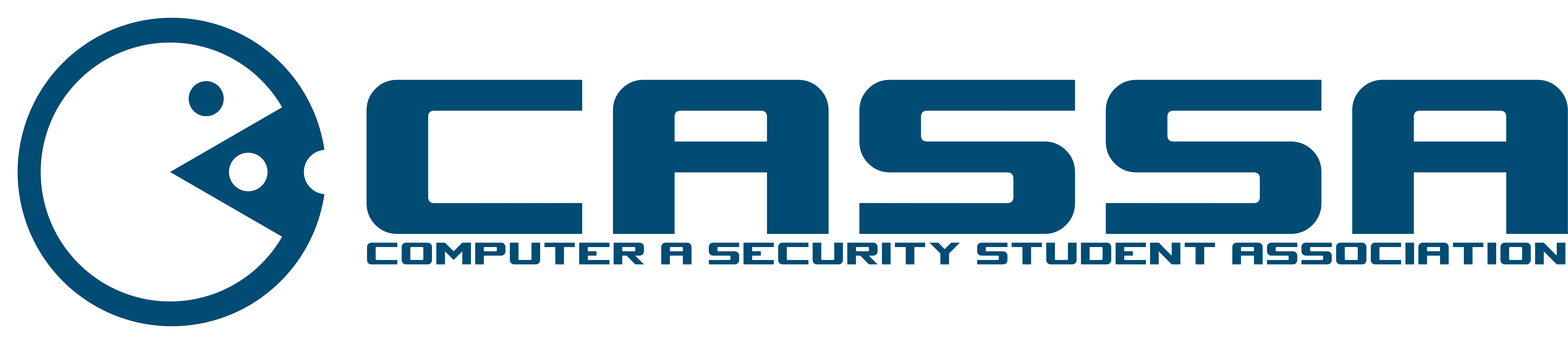
<style>
.page{position:relative;width:1568px;height:344px;background:#ffffff}
.page>*{position:absolute;margin:0}
.t1{font:246.4px "SpaceMarine-Nominal";color:#014c74}
.t2{font:34.6px "SpaceMarine-Nominal";color:#014c74}
</style>
<div class="page">
<p class="t1" style="left:366px;top:80px;width:1202px;height:154px">CASSA</p>
<p class="t2" style="left:367px;top:243px;width:1199px;height:21px">COMPUTER A SECURITY STUDENT ASSOCIATION</p>
</div>
